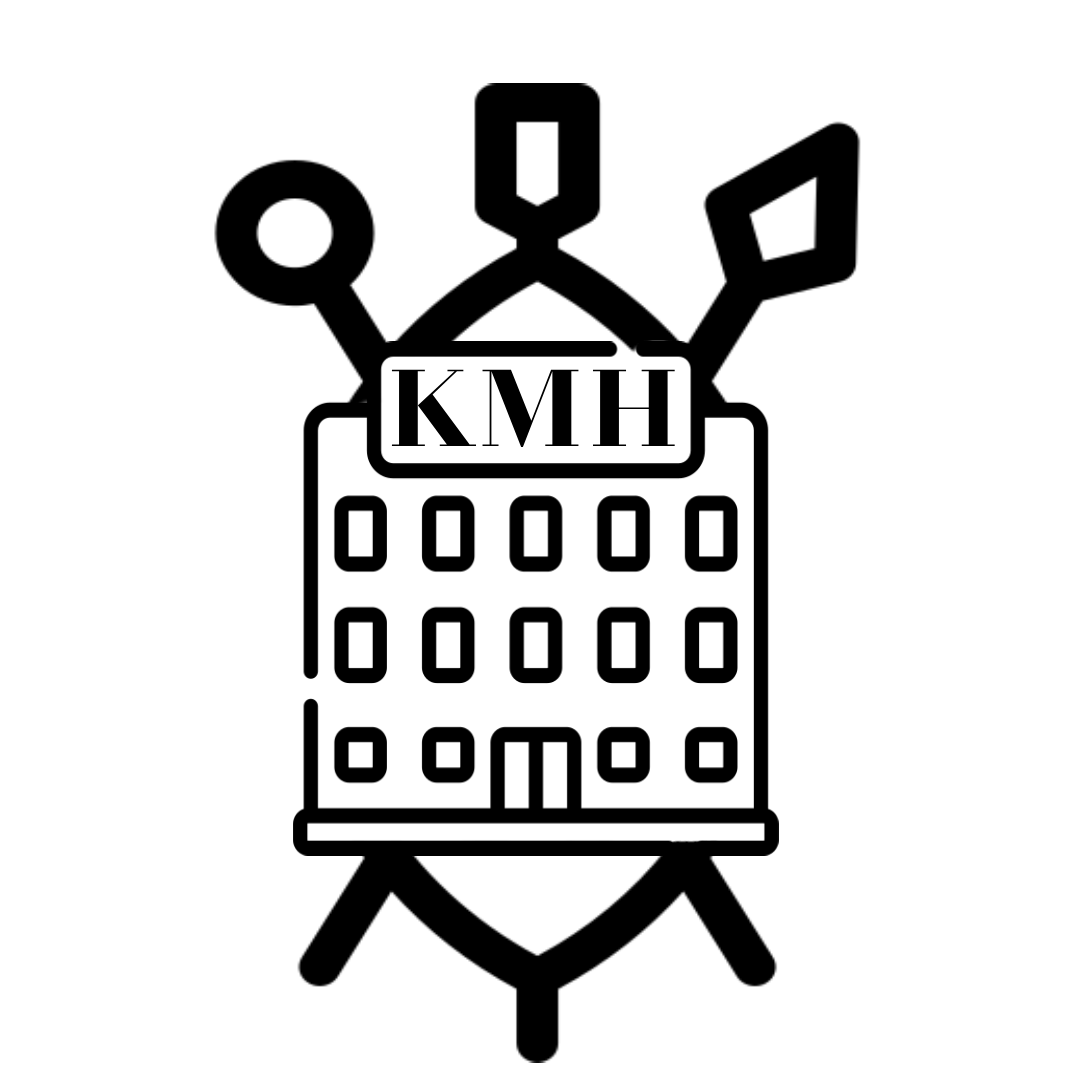
<style>
.page{position:relative;width:1080px;height:1080px;background:#ffffff}
.page>*{position:absolute;margin:0}
.t1{font:108.8px "Otama-ep";color:#000000;scale:1.09 1}
</style>
<div class="page">
<p class="t1" style="left:391px;top:369px;width:284px;height:78px">KMH</p>
</div>
